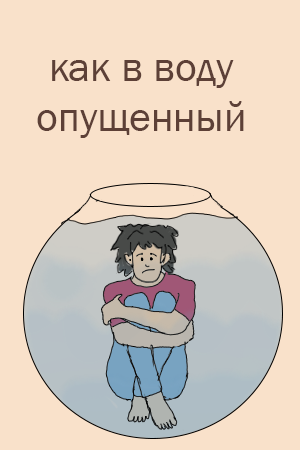
<style>
.page{position:relative;width:300px;height:450px;background:#f9e1ca}
.page>*{position:absolute;margin:0}
.t1{font:41.7px "FranklinGothic-Book";color:#5d4037}
</style>
<div class="page">
<p class="t1" style="left:37px;top:60px;width:207px;height:78px;text-align:center">как в воду<br>опущенный</p>
</div>
